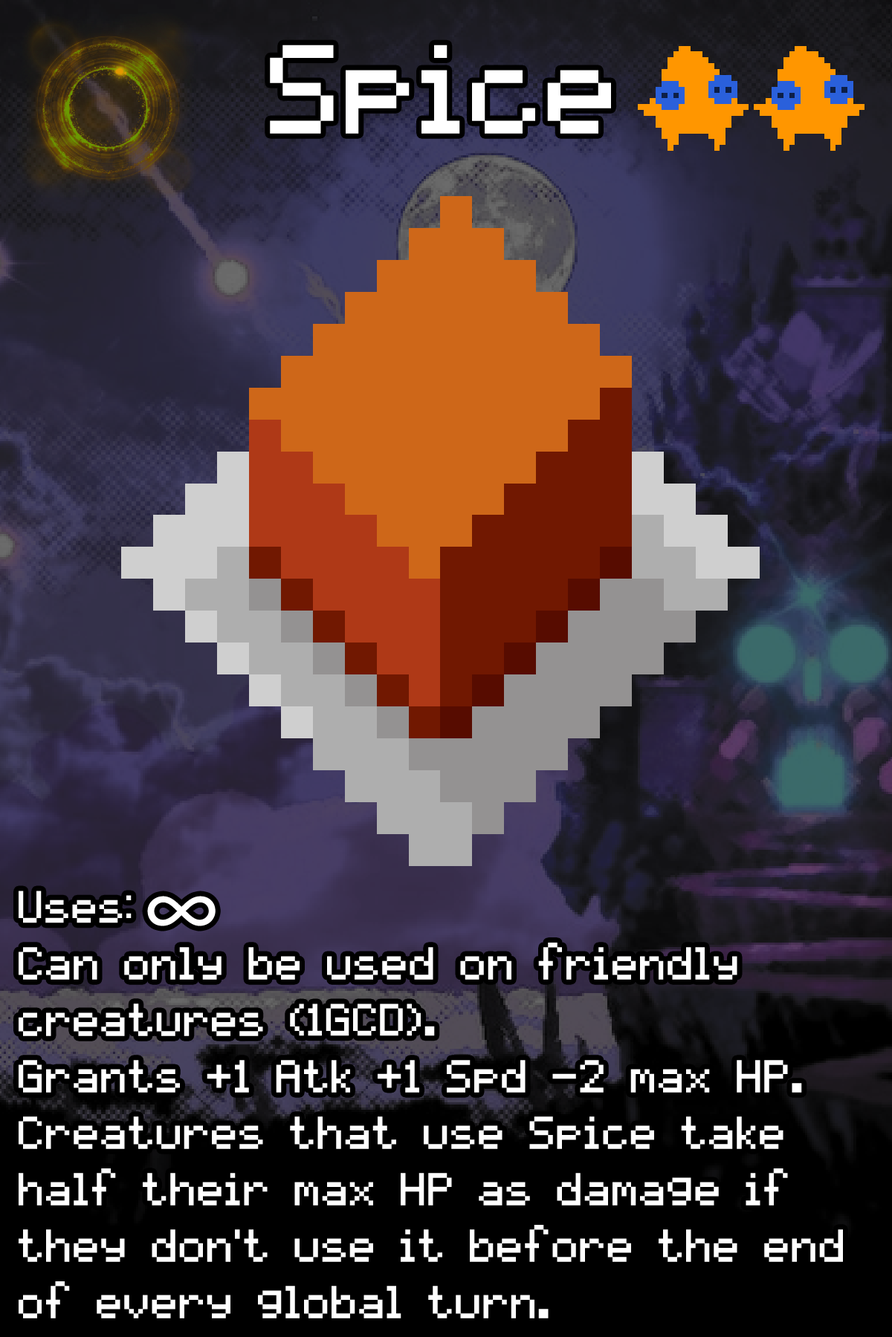
<style>
.page{position:relative;width:892px;height:1337px}
.page>*{position:absolute;margin:0}
.t1{font:173.1px "pixelmix";color:#ffffff}
.t2{font:63.2px/56.5px "pixelmix";color:#ffffff}
.t3{font:61.7px/56.5px "pixelmix";color:#ffffff}
.t4{font:170.8px/56.5px "MyriadPro-Regular";color:#ffffff;scale:1.03 1}
</style>
<div class="page">
<p class="t1" style="left:270px;top:45px;width:341px;height:89px">Spice</p>
<p class="t2" style="left:19px;top:891px;width:824px;height:428px"><span class="t3">Uses: </span><span class="t4">∞</span><span class="t3"><br></span>Can only be used on friendly creatures <span class="t3">(1GCD).<br></span>Grants +1 Atk +1 Spd -2 max HP. Creatures that use Spice take half their max HP as damage if they don't use it before the end of every global turn.</p>
</div>
